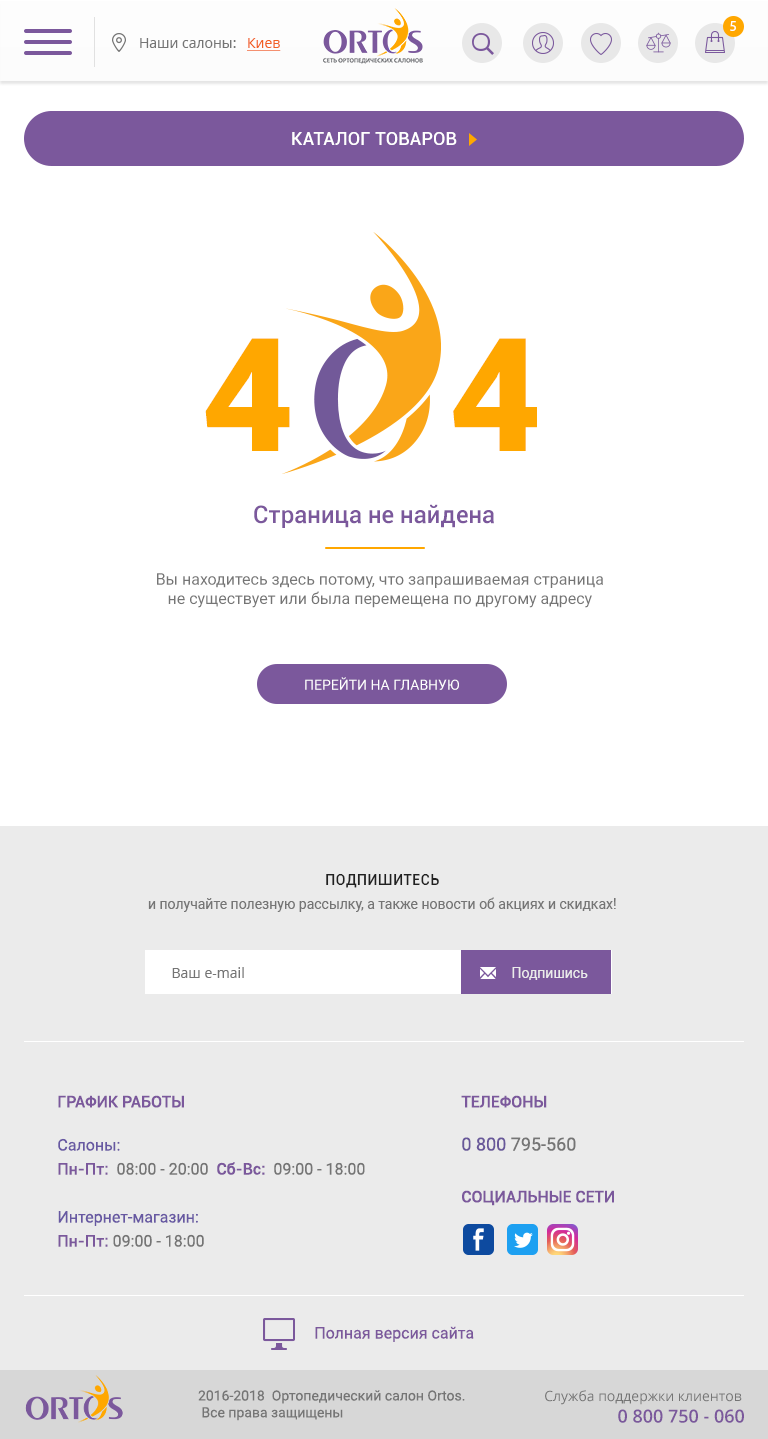
<style>
.page{position:relative;width:768px;height:1439px;background:#ffffff}
.page>*{position:absolute;margin:0}
.t1{font:14px "MyriadPro-Regular";letter-spacing:0.1em;color:#ffffff;text-transform:uppercase}
.t2{font:14px "OpenSans";color:#757575}
.t3{font:14px "OpenSans";color:#f26022;text-decoration:underline}
.t4{font:18px "Roboto-Medium";letter-spacing:0.01em;color:#ffffff;text-transform:uppercase}
.t5{font:157.9px "Roboto-Black";letter-spacing:0.05em;color:#ffa700}
.t6{font:24px "Roboto-Medium";color:#7b589c}
.t7{font:16px "Roboto-Regular";color:#757575}
.t8{font:14px "Roboto-Regular";color:#ffffff;text-transform:uppercase}
.t9{font:14px/24px "Roboto-Regular";color:#757575}
.t10{font:14px "Roboto-Medium";letter-spacing:0.05em;color:#212121;text-transform:uppercase}
.t11{font:14px "Roboto-Regular";color:#ebebeb}
.t12{font:16px/24px "Roboto-Regular";color:#6758a2}
.t13{font:16px "Roboto-Medium";color:#7b589c;text-transform:uppercase}
.t14{font:16px/24px "Roboto-Medium";color:#7b589c}
.t15{font:16px/24px "Roboto-Regular";color:#757575}
.t16{font:18px/24px "Roboto-Regular";color:#68579a}
.t17{font:18px/24px "Roboto-Regular";color:#757575}
.t18{font:16px "Roboto-Regular";color:#7b589c}
.t19{font:14px "Roboto-Regular";color:#757575}
.t20{font:18px "OpenSans-Semibold";color:#7b589c}
</style>
<div class="page">
<p class="t1" style="left:730px;top:21px;width:6px;height:10px">5</p>
<p class="t2" style="left:140px;top:38px;width:141px;height:13px">Наши салоны: <span class="t3">Киев</span></p>
<p class="t4" style="left:292px;top:132px;width:165px;height:13px">Каталог товаров</p>
<p class="t5" style="left:205px;top:338px;width:85px;height:113px">4</p>
<p class="t5" style="left:453px;top:338px;width:84px;height:113px">4</p>
<p class="t6" style="left:254px;top:504px;width:240px;height:24px">Страница не найдена</p>
<p class="t7" style="left:157px;top:573px;width:446px;height:35px;text-align:center">Вы находитесь здесь потому, что запрашиваемая страница не существует или была перемещена по другому адресу</p>
<p class="t8" style="left:305px;top:677px;width:154px;height:13px">Перейти на главную</p>
<p class="t9" style="left:148px;top:874px;width:468px;height:38px;text-align:center"><span class="t10">Подпишитесь <br></span>и получайте полезную рассылку, а также новости об акциях и скидках!</p>
<p class="t2" style="left:172px;top:967px;width:72px;height:11px">Ваш e-mail</p>
<p class="t11" style="left:512px;top:967px;width:76px;height:13px">Подпишись</p>
<p class="t12" style="left:58px;top:1095px;width:307px;height:152px"><span class="t13">График работы<br><br></span>Салоны: <br><span class="t14">Пн-Пт:</span><span class="t15">  08:00 - 20:00  </span><span class="t14">Сб-Вс:</span><span class="t15">  09:00 - 18:00<br><br></span>Интернет-магазин:<br><span class="t14">Пн-Пт:</span><span class="t15"> 09:00 - 18:00</span></p>
<p class="t13" style="left:461px;top:1095px;width:115px;height:56px">Телефоны<br><br><span class="t16">0 800 </span><span class="t17">795-560</span></p>
<p class="t13" style="left:462px;top:1190px;width:152px;height:16px">Социальные сети</p>
<p class="t18" style="left:315px;top:1326px;width:159px;height:16px">Полная версия сайта</p>
<p class="t19" style="left:198px;top:1390px;width:267px;height:31px">2016-2018  Ортопедический салон Ortos.<br> Все права защищены</p>
<p class="t2" style="left:545px;top:1390px;width:199px;height:33px;text-align:right">Служба поддержки клиентов <br> <span class="t20">0 800 750 - 060</span></p>
</div>
